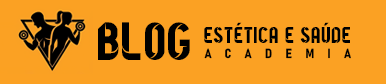
<style>
.page{position:relative;width:386px;height:84px;background:#fba123}
.page>*{position:absolute;margin:0}
.t1{font:53.8px "Barcelona2012byRoca";color:#000000}
.t2{font:23px "Barcelona2012byRoca";color:#000000}
.t3{font:13px "Bahnschrift-BoldSemiCondensed";letter-spacing:1.04em;color:#000000}
</style>
<div class="page">
<p class="t1" style="left:98px;top:22px;width:92px;height:38px">Blog</p>
<p class="t2" style="left:204px;top:22px;width:146px;height:21px">estética e saúde</p>
<p class="t3" style="left:204px;top:48px;width:147px;height:11px">ACADEMIA</p>
</div>
